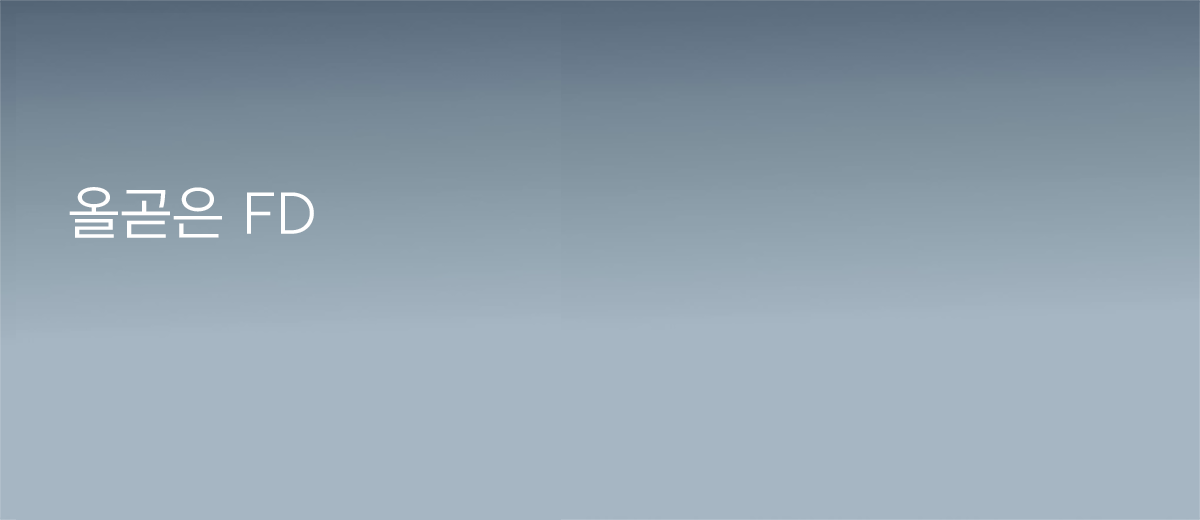
<style>
.page{position:relative;width:1200px;height:520px;background:#a6b6c3}
.page>*{position:absolute;margin:0}
.t1{font:55px "NEXONLv1GothicLowOTFRegular";color:#ffffff}
</style>
<div class="page">
<p class="t1" style="left:69px;top:187px;width:245px;height:51px">올곧은 FD</p>
</div>
